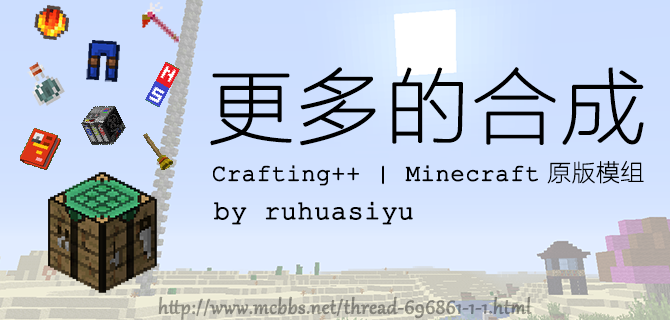
<style>
.page{position:relative;width:670px;height:320px}
.page>*{position:absolute;margin:0}
.t1{font:83.1px "FZLTCXHJW--GB1-0";color:#000000;font-weight:bold;scale:1.03 1}
.t2{font:23.8px "CourierNewPSMT";color:#000000;font-weight:bold}
.t3{font:23.8px "FZLTCXHJW--GB1-0";color:#000000;font-weight:bold}
.t4{font:26.7px "CourierNewPSMT";color:#000000;font-weight:bold}
.t5{font:24.4px "Gabriola";color:#84837e;font-weight:bold}
</style>
<div class="page">
<p class="t1" style="left:210px;top:67px;width:434px;height:79px">更多的合成</p>
<p class="t2" style="left:213px;top:160px;width:431px;height:26px">Crafting++ | Minecraft<span class="t3"> 原版模组</span></p>
<p class="t4" style="left:214px;top:201px;width:199px;height:24px">by ruhuasiyu</p>
<p class="t5" style="left:158px;top:296px;width:374px;height:24px">http://www.mcbbs.net/thread-696861-1-1.html</p>
</div>
